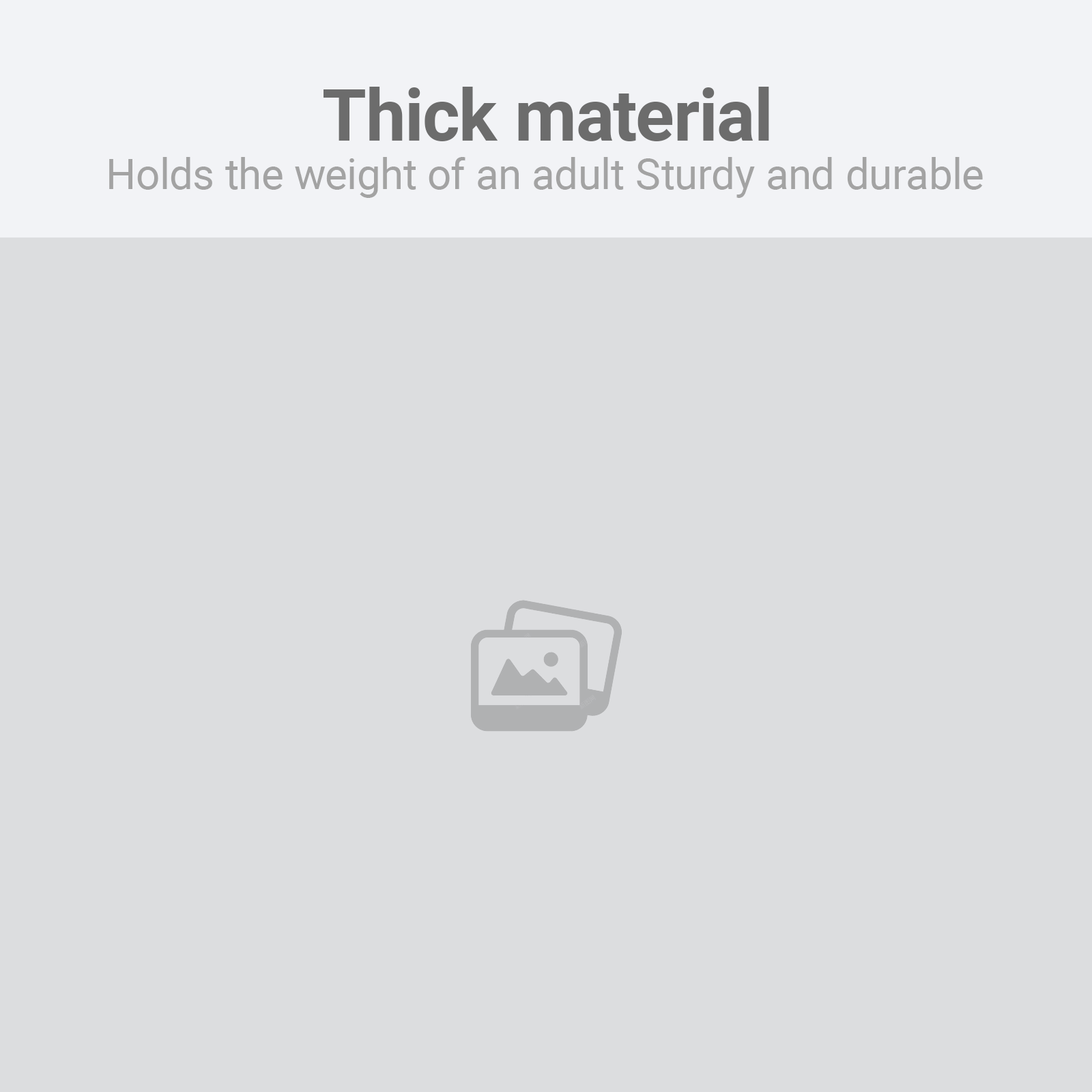
<style>
.page{position:relative;width:1092px;height:1092px;background:#dcdddf}
.page>*{position:absolute;margin:0}
.t1{font:71.3px "Roboto-Bold";color:#6c6c6c}
.t2{font:42.2px "Roboto-Regular";color:#a3a3a3}
</style>
<div class="page">
<p class="t1" style="left:324px;top:87px;width:445px;height:54px">Thick material</p>
<p class="t2" style="left:109px;top:157px;width:874px;height:41px">Holds the weight of an adult Sturdy and durable</p>
</div>
